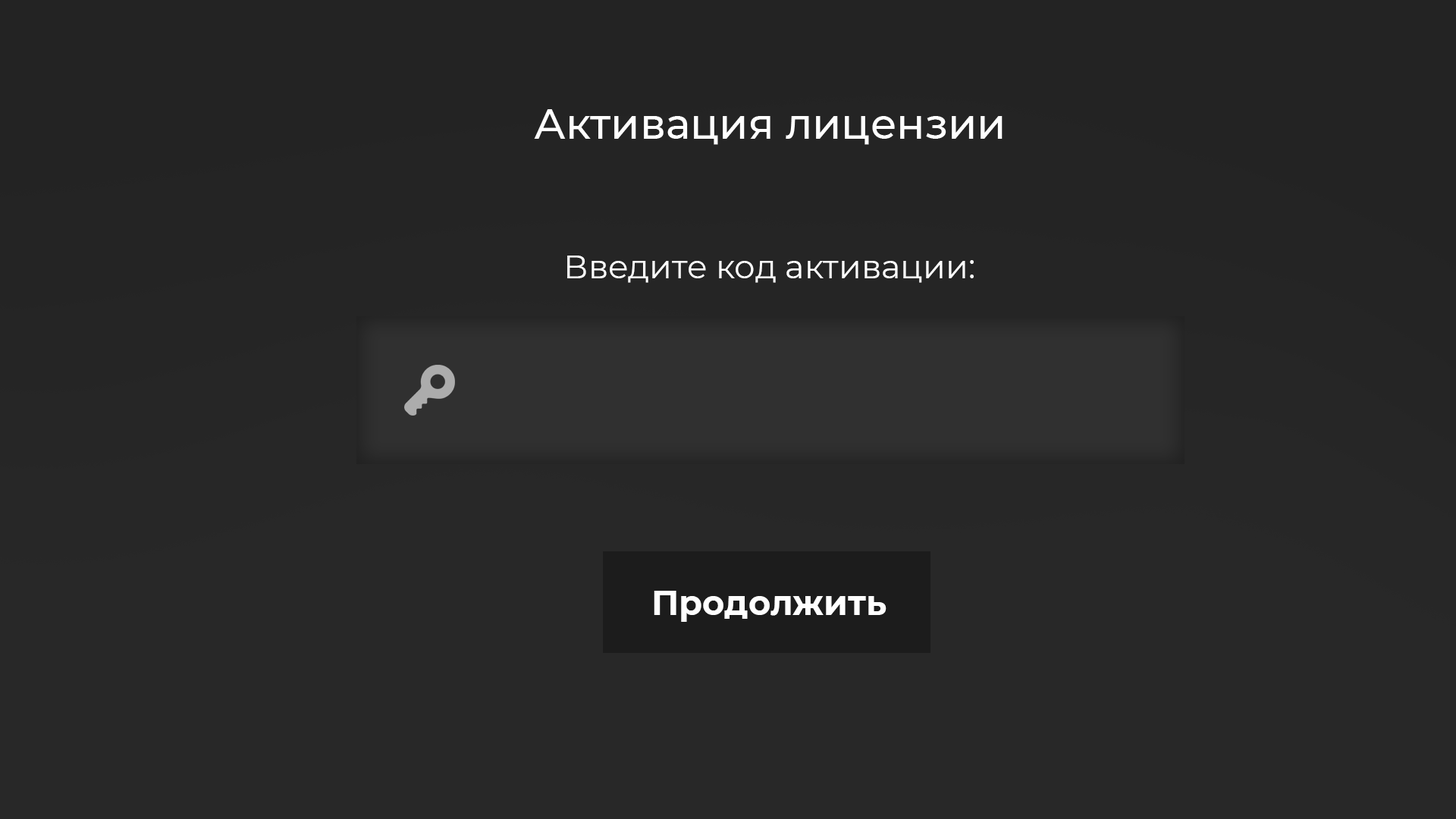
<style>
.page{position:relative;width:1456px;height:819px;background:#282828}
.page>*{position:absolute;margin:0}
.t1{font:33.4px "Montserrat-Regular";color:#ffffff}
.t2{font:34px "Montserrat-Bold";color:#ffffff}
</style>
<div class="page">
<p class="t1" style="left:567px;top:256px;width:407px;height:27px">Введите код активации:</p>
<p class="t2" style="left:654px;top:591px;width:232px;height:31px">Продолжить</p>
</div>
